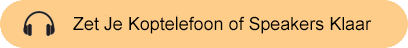
<style>
.page{position:relative;width:408px;height:48px;background:#fecd8a}
.page>*{position:absolute;margin:0}
.t1{font:17.9px "ArialMT";color:#000000}
</style>
<div class="page">
<p class="t1" style="left:73px;top:16px;width:299px;height:18px">Zet Je Koptelefoon of Speakers Klaar</p>
</div>
